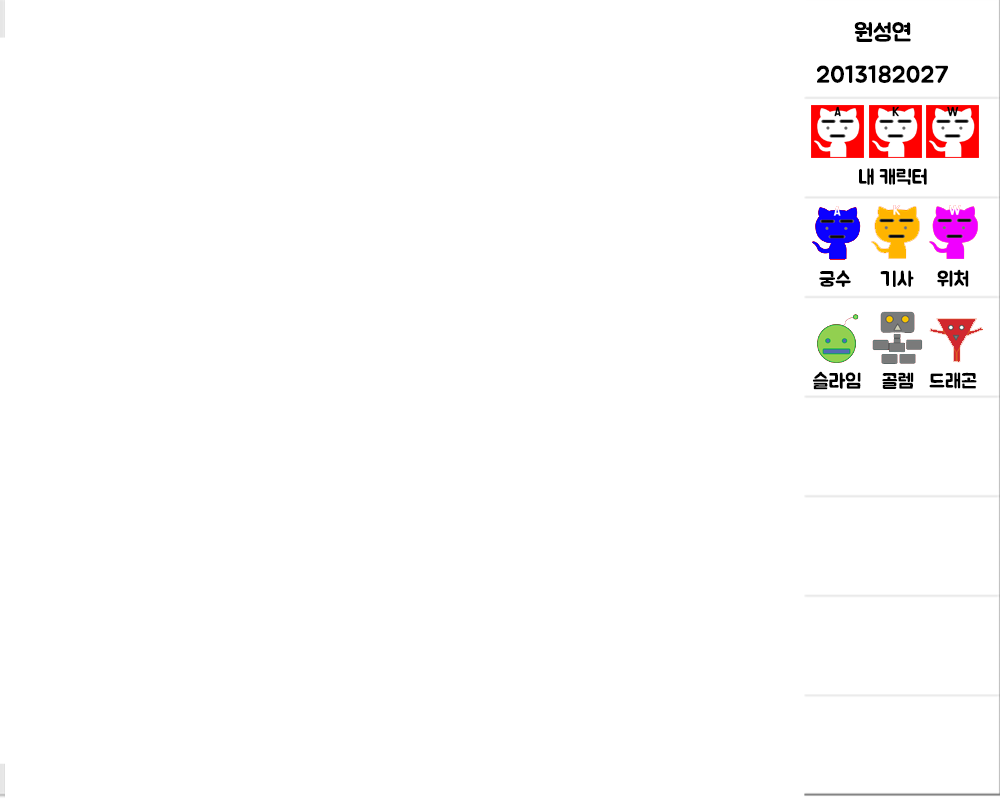
<style>
.page{position:relative;width:1000px;height:800px;background:#ffffff}
.page>*{position:absolute;margin:0}
.t1{font:24px "BMJUA";color:#000000}
.t2{font:20px "BMJUA";color:#000000}
</style>
<div class="page">
<p class="t1" style="left:817px;top:22px;width:131px;height:61px;text-align:center">원성연<br>2013182027</p>
<p class="t2" style="left:859px;top:168px;width:68px;height:17px">내 캐릭터</p>
<p class="t2" style="left:819px;top:270px;width:32px;height:17px">궁수</p>
<p class="t2" style="left:880px;top:270px;width:34px;height:17px">기사</p>
<p class="t2" style="left:937px;top:269px;width:32px;height:18px">위처</p>
<p class="t2" style="left:812px;top:371px;width:49px;height:19px">슬라임</p>
<p class="t2" style="left:882px;top:372px;width:32px;height:17px">골렘</p>
<p class="t2" style="left:929px;top:372px;width:48px;height:17px">드래곤</p>
</div>
